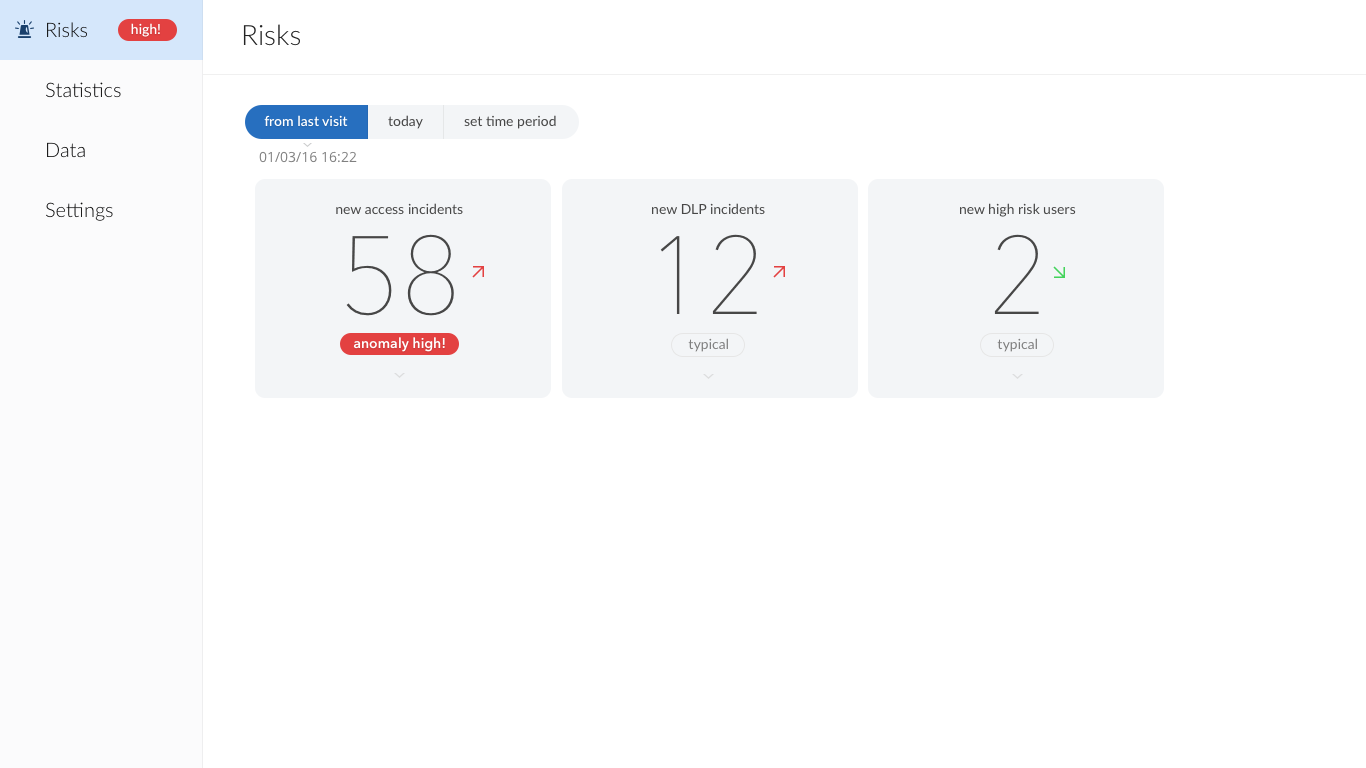
<style>
.page{position:relative;width:1366px;height:768px;background:#ffffff}
.page>*{position:absolute;margin:0}
.t1{font:20px/60px "Lato-Light";color:#0d0d0d}
.t2{font:14px "Lato-Semibold";color:#ffffff}
.t3{font:28px "Lato-Light";color:#242424}
.t4{font:14px "OpenSans-Semibold";color:#ffffff}
.t5{font:14px "Lato-Regular";color:#474747}
.t6{font:14px "OpenSans";color:#808080}
.t7{font:110px "AvenirNext-UltraLight";color:#474747}
.t8{font:14px "AvenirNext-DemiBold";color:#ffffff}
</style>
<div class="page">
<p class="t1" style="left:46px;top:22px;width:75px;height:199px">Risks<br>Statistics<br>Data<br>Settings</p>
<p class="t2" style="left:131px;top:23px;width:29px;height:14px">high!</p>
<p class="t3" style="left:243px;top:24px;width:57px;height:22px">Risks</p>
<p class="t4" style="left:264px;top:115px;width:84px;height:12px">from last visit</p>
<p class="t5" style="left:388px;top:115px;width:35px;height:14px">today</p>
<p class="t5" style="left:464px;top:115px;width:92px;height:14px">set time period</p>
<p class="t6" style="left:259px;top:151px;width:98px;height:12px">01/03/16 16:22</p>
<p class="t5" style="left:336px;top:203px;width:127px;height:12px">new access incidents</p>
<p class="t5" style="left:652px;top:203px;width:113px;height:12px">new DLP incidents</p>
<p class="t5" style="left:960px;top:203px;width:116px;height:14px">new high risk users</p>
<p class="t7" style="left:346px;top:234px;width:108px;height:82px">58</p>
<p class="t7" style="left:660px;top:234px;width:97px;height:80px">12</p>
<p class="t7" style="left:994px;top:234px;width:45px;height:80px">2</p>
<p class="t8" style="left:353px;top:337px;width:92px;height:15px">anomaly high!</p>
<p class="t6" style="left:688px;top:338px;width:40px;height:14px">typical</p>
<p class="t6" style="left:997px;top:338px;width:40px;height:14px">typical</p>
</div>
